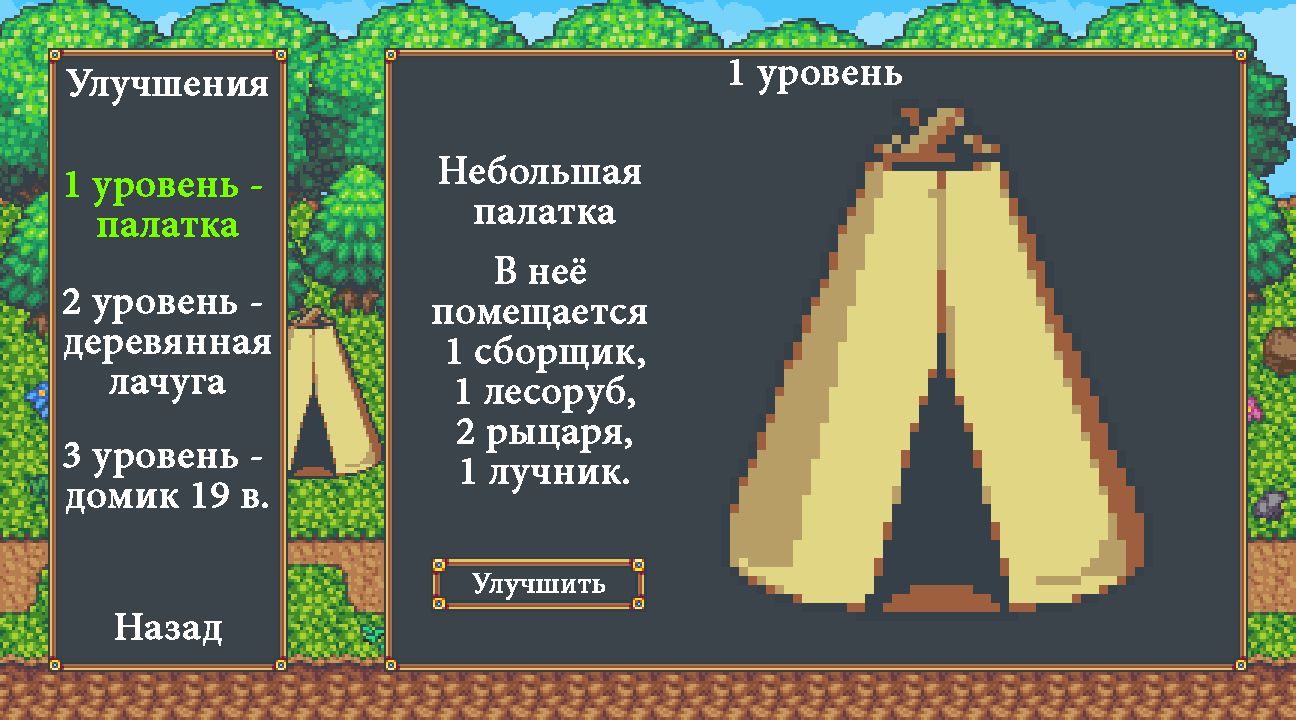
<style>
.page{position:relative;width:1296px;height:720px;background:#3b444b}
.page>*{position:absolute;margin:0}
.t1{font:39.7px "MinionPro-Medium";color:#ffffff;font-weight:bold}
.t2{font:39.8px "MinionPro-Medium";color:#ffffff;font-weight:bold}
.t3{font:40px/20px "MinionPro-Medium";color:#ffffff;font-weight:bold}
.t4{font:39.8px/19.9px "MinionPro-Medium";color:#78ff00;font-weight:bold}
</style>
<div class="page">
<p class="t1" style="left:730px;top:59px;width:172px;height:36px">1 уровень</p>
<p class="t2" style="left:66px;top:69px;width:202px;height:37px">Улучшения</p>
<p class="t3" style="left:432px;top:155px;width:215px;height:339px;text-align:center">Небольшая <br><br>палатка<br><br><br>В неё <br><br>помещается <br><br>1 сборщик,<br><br>1 лесоруб,<br><br>2 рыцаря,<br><br>1 лучник.</p>
<p class="t4" style="left:66px;top:171px;width:196px;height:66px;text-align:center">1 уровень - <br><br>палатка</p>
<p class="t3" style="left:63px;top:288px;width:208px;height:116px;text-align:center">2 уровень - <br><br>деревянная<br><br>лачуга</p>
<p class="t3" style="left:63px;top:442px;width:205px;height:72px;text-align:center">3 уровень - <br><br>домик 19 в.</p>
<p class="t1" style="left:115px;top:613px;width:107px;height:33px">Назад</p>
</div>
